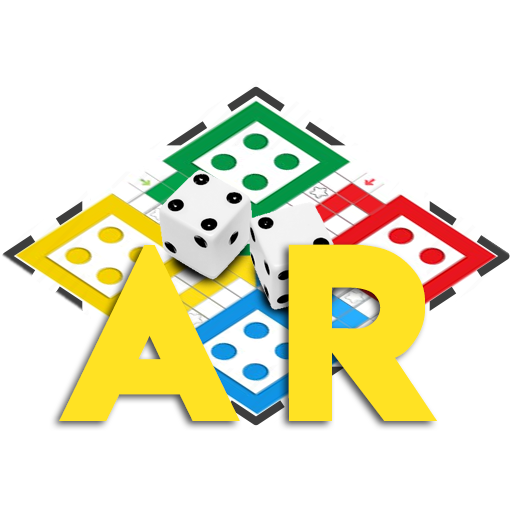
<style>
.page{position:relative;width:512px;height:512px;background:#ffffff}
.page>*{position:absolute;margin:0}
.t1{font:224px "LemonMilkbold";letter-spacing:0.15em;color:#ffe223}
</style>
<div class="page">
<p class="t1" style="left:59px;top:244px;width:378px;height:177px">AR</p>
</div>
